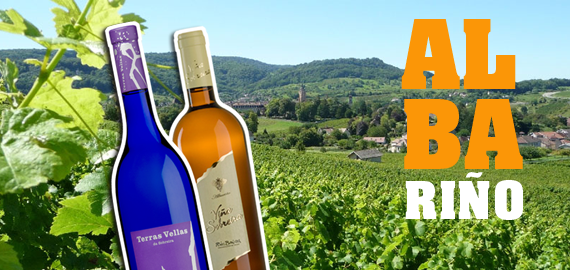
<style>
.page{position:relative;width:570px;height:270px}
.page>*{position:absolute;margin:0}
.t1{font:82px/80px "AachenStd-Bold";letter-spacing:0.025em;color:#fb9607}
.t2{font:82px/80px "AachenStd-Bold";letter-spacing:0.005em;color:#fb9607}
.t3{font:44px "AachenStd-Bold";letter-spacing:0.025em;color:#ffffff}
</style>
<div class="page">
<p class="t1" style="left:401px;top:19px;width:122px;height:150px">AL<br><span class="t2">BA</span></p>
<p class="t3" style="left:405px;top:172px;width:118px;height:48px">RIÑO</p>
</div>
